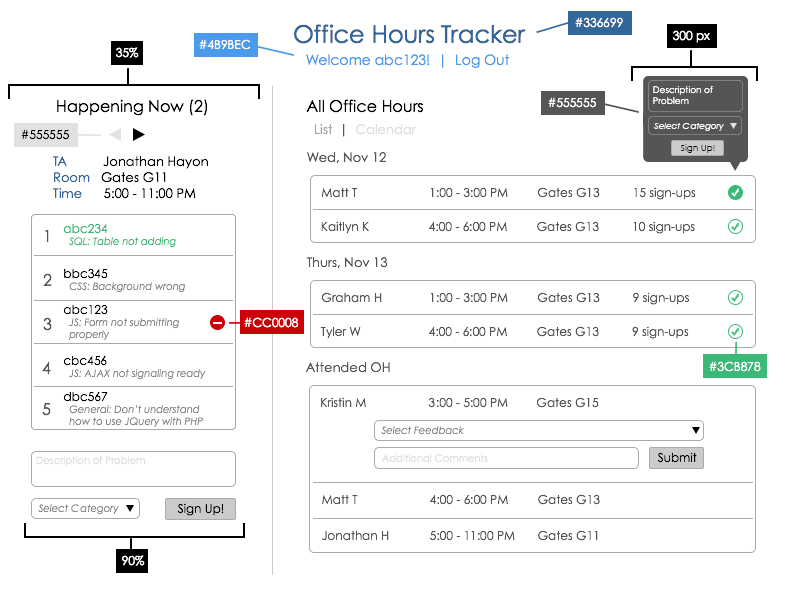
<style>
.page{position:relative;width:800px;height:600px;background:#ffffff}
.page>*{position:absolute;margin:0}
.t1{font:12px "CenturyGothic";color:#ffffff}
.t2{font:24px "CenturyGothic";color:#336699}
.t3{font:14px "CenturyGothic";color:#4b9bec}
.t4{font:9px "CenturyGothic";color:#ffffff}
.t5{font:16px "CenturyGothic";color:#000000}
.t6{font:13px "CenturyGothic";color:#dedede}
.t7{font:13px "CenturyGothic";color:#a6a5a5}
.t8{font:13px "CenturyGothic";color:#555555}
.t9{font:9px "CenturyGothic-Italic";color:#ffffff;scale:0.95 1}
.t10{font:12px "CenturyGothic";color:#000000}
.t11{font:8.7px "CenturyGothic";color:#000000}
.t12{font:13px "CenturyGothic";color:#000000}
.t13{font:13px "CenturyGothic";color:#336699}
.t14{font:12px "CenturyGothic";color:#555555}
.t15{font:16px "CenturyGothic";color:#555555}
.t16{font:10px "CenturyGothic-Italic";color:#3cb878}
.t17{font:12px "CenturyGothic";color:#3cb878}
.t18{font:10px "CenturyGothic-Italic";color:#888888}
.t19{font:10px "CenturyGothic";color:#dcdddd}
</style>
<div class="page">
<p class="t1" style="left:575px;top:17px;width:48px;height:11px">#336699</p>
<p class="t2" style="left:294px;top:24px;width:232px;height:20px">Office Hours Tracker</p>
<p class="t1" style="left:673px;top:30px;width:37px;height:13px">300 px</p>
<p class="t1" style="left:199px;top:39px;width:52px;height:11px">#4B9BEC</p>
<p class="t1" style="left:116px;top:47px;width:23px;height:11px">35%</p>
<p class="t3" style="left:306px;top:54px;width:204px;height:14px">Welcome abc123!  |  Log Out</p>
<p class="t4" style="left:653px;top:86px;width:60px;height:19px">Description of <br>Problem</p>
<p class="t5" style="left:57px;top:99px;width:151px;height:17px">Happening Now (2)</p>
<p class="t5" style="left:306px;top:99px;width:118px;height:14px">All Office Hours</p>
<p class="t1" style="left:548px;top:97px;width:48px;height:11px">#555555</p>
<p class="t6" style="left:314px;top:124px;width:102px;height:13px"><span class="t7">List  </span><span class="t8">|  </span>Calendar</p>
<p class="t9" style="left:654px;top:123px;width:70px;height:8px">Select Category</p>
<p class="t10" style="left:21px;top:129px;width:48px;height:11px">#555555</p>
<p class="t11" style="left:680px;top:144px;width:35px;height:9px">Sign Up!</p>
<p class="t12" style="left:53px;top:156px;width:155px;height:43px"><span class="t13">TA          </span>Jonathan Hayon<br><span class="t13">Room   </span>Gates G11<br><span class="t13">Time      </span>5:00 - 11:00 PM</p>
<p class="t8" style="left:307px;top:152px;width:79px;height:11px">Wed, Nov 12</p>
<p class="t14" style="left:321px;top:187px;width:375px;height:13px">Matt T   1:00 - 3:00 PM Gates G13        15 sign-ups</p>
<p class="t14" style="left:321px;top:221px;width:374px;height:13px">Kaitlyn K  4:00 - 6:00 PM Gates G13        10 sign-ups</p>
<p class="t15" style="left:45px;top:230px;width:4px;height:12px">1</p>
<p class="t16" style="left:63px;top:223px;width:113px;height:25px"><span class="t17">abc234<br></span>  SQL: Table not adding</p>
<p class="t8" style="left:306px;top:257px;width:82px;height:11px">Thurs, Nov 13</p>
<p class="t18" style="left:64px;top:268px;width:121px;height:25px"><span class="t10">bbc345<br></span>  CSS: Background wrong</p>
<p class="t15" style="left:43px;top:273px;width:9px;height:13px">2</p>
<p class="t14" style="left:321px;top:292px;width:368px;height:13px">Graham H  1:00 - 3:00 PM Gates G13        9 sign-ups</p>
<p class="t18" style="left:63px;top:304px;width:116px;height:36px"><span class="t10">abc123<br></span>  JS: Form not submitting<br>  properly</p>
<p class="t15" style="left:43px;top:317px;width:9px;height:14px">3</p>
<p class="t1" style="left:244px;top:317px;width:55px;height:11px">#CC0008</p>
<p class="t14" style="left:320px;top:326px;width:369px;height:13px">Tyler W  4:00 - 6:00 PM Gates G13        9 sign-ups</p>
<p class="t15" style="left:42px;top:361px;width:9px;height:13px">4</p>
<p class="t18" style="left:63px;top:355px;width:143px;height:25px"><span class="t10">cbc456<br></span>  JS: AJAX not signaling ready</p>
<p class="t8" style="left:305px;top:362px;width:85px;height:11px">Attended OH</p>
<p class="t1" style="left:709px;top:361px;width:52px;height:11px">#3CB878</p>
<p class="t18" style="left:63px;top:391px;width:140px;height:36px"><span class="t10">dbc567<br></span>  General: Don’t understand <br>  how to use JQuery with PHP</p>
<p class="t14" style="left:321px;top:397px;width:278px;height:11px">Kristin M  3:00 - 5:00 PM Gates G15</p>
<p class="t15" style="left:42px;top:403px;width:9px;height:13px">5</p>
<p class="t18" style="left:381px;top:426px;width:83px;height:9px">Select Feedback</p>
<p class="t19" style="left:36px;top:456px;width:109px;height:10px">Description of Problem</p>
<p class="t19" style="left:381px;top:454px;width:107px;height:9px">Additional Comments</p>
<p class="t10" style="left:657px;top:452px;width:40px;height:11px">Submit</p>
<p class="t14" style="left:322px;top:494px;width:278px;height:11px">Matt T   4:00 - 6:00 PM Gates G13</p>
<p class="t18" style="left:38px;top:504px;width:81px;height:11px">Select Category</p>
<p class="t10" style="left:177px;top:503px;width:47px;height:13px">Sign Up!</p>
<p class="t14" style="left:322px;top:530px;width:276px;height:11px">Jonathan H  5:00 - 11:00 PM Gates G11</p>
<p class="t1" style="left:122px;top:555px;width:23px;height:11px">90%</p>
</div>
